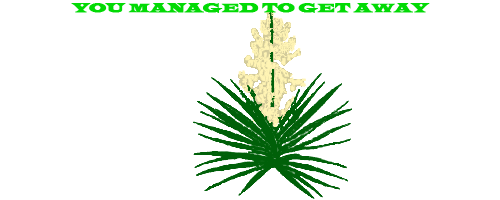
<style>
.page{position:relative;width:500px;height:200px;background:#ffffff}
.page>*{position:absolute;margin:0}
.t1{font:12.5px "LatinWide";color:#02da05;text-transform:uppercase;font-weight:bold}
</style>
<div class="page">
<p class="t1" style="left:71px;top:3px;width:359px;height:10px">You managed to get away</p>
</div>
